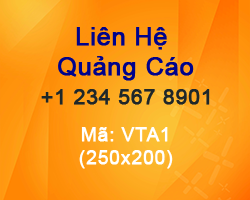
<style>
.page{position:relative;width:250px;height:200px}
.page>*{position:absolute;margin:0}
.t1{font:25px "ArialMT";color:#00038b;font-weight:bold}
.t2{font:20.8px "ArialMT";color:#202728;font-weight:bold}
.t3{font:18.8px "ArialMT";color:#ffffff;font-weight:bold}
</style>
<div class="page">
<p class="t1" style="left:58px;top:27px;width:136px;height:54px;text-align:center">Liên Hệ <br>Quảng Cáo</p>
<p class="t2" style="left:41px;top:89px;width:169px;height:16px">+1 234 567 8901</p>
<p class="t3" style="left:79px;top:127px;width:94px;height:42px;text-align:center">Mã: VTA1<br>(250x200)</p>
</div>
